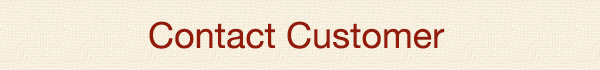
<style>
.page{position:relative;width:600px;height:70px}
.page>*{position:absolute;margin:0}
.t1{font:36px "HelveticaNeue";color:#931b0c}
</style>
<div class="page">
<p class="t1" style="left:149px;top:21px;width:296px;height:28px">Contact Customer</p>
</div>
